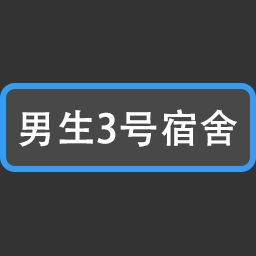
<style>
.page{position:relative;width:256px;height:256px;background:#333333}
.page>*{position:absolute;margin:0}
.t1{font:39px "AdobeHeitiStd-Regular";color:#ffffff;font-weight:bold}
</style>
<div class="page">
<p class="t1" style="left:19px;top:109px;width:218px;height:38px">男生3号宿舍</p>
</div>
